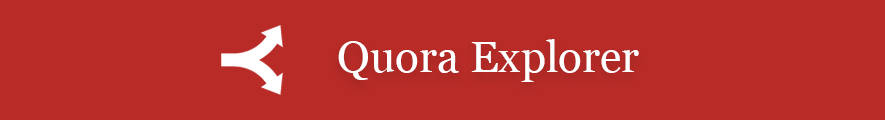
<style>
.page{position:relative;width:885px;height:120px;background:#b82b27}
.page>*{position:absolute;margin:0}
.t1{font:44px "Georgia";color:#ffffff}
</style>
<div class="page">
<p class="t1" style="left:338px;top:39px;width:301px;height:43px">Quora Explorer</p>
</div>
